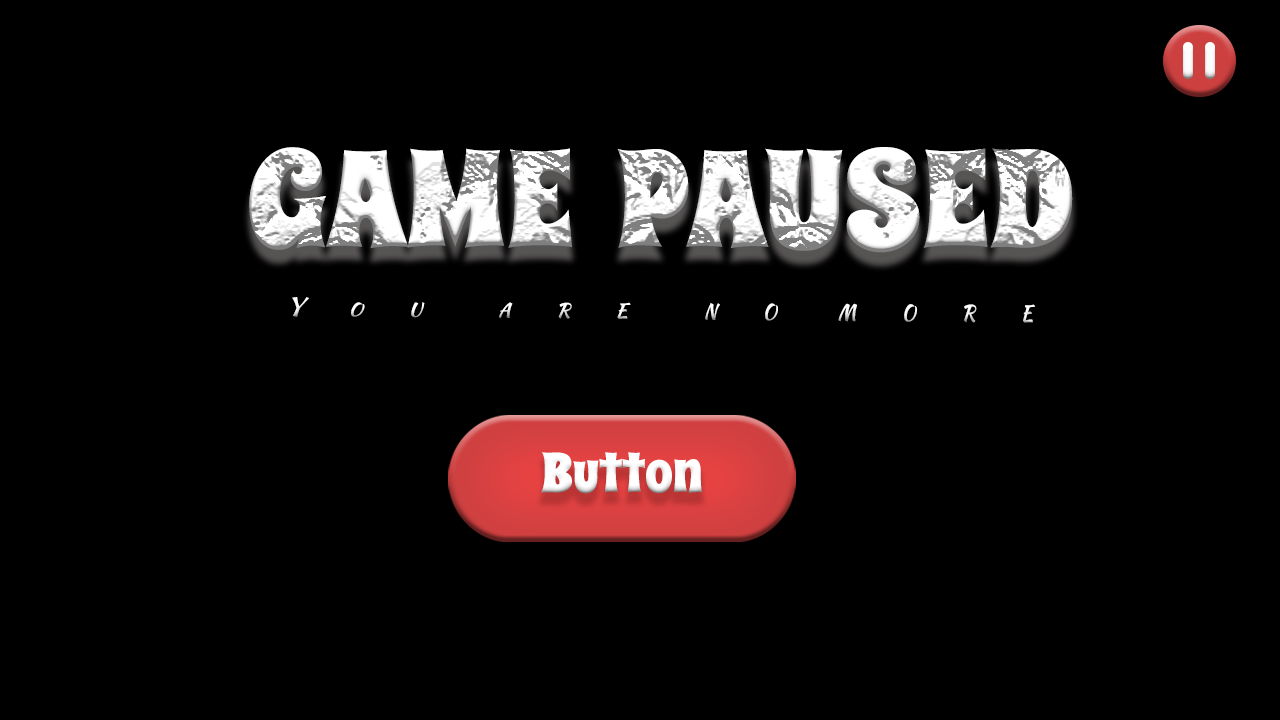
<style>
.page{position:relative;width:1280px;height:720px;background:#000000}
.page>*{position:absolute;margin:0}
.t1{font:136.4px "SpicyRice-Regular"}
.t2{font:47.1px "KaushanScript-Regular";color:#ffffff;font-variant:small-caps}
.t3{font:55.4px "SpicyRice-Regular";color:#ffffff}
</style>
<div class="page">
<p class="t1" style="left:249px;top:147px;width:824px;height:106px">GAME  PAUSED</p>
<p class="t2" style="left:292px;top:297px;width:743px;height:26px">Y   o   u     a   r   e     n   o    m   o   r   e</p>
<p class="t3" style="left:541px;top:452px;width:161px;height:42px">Button</p>
</div>
